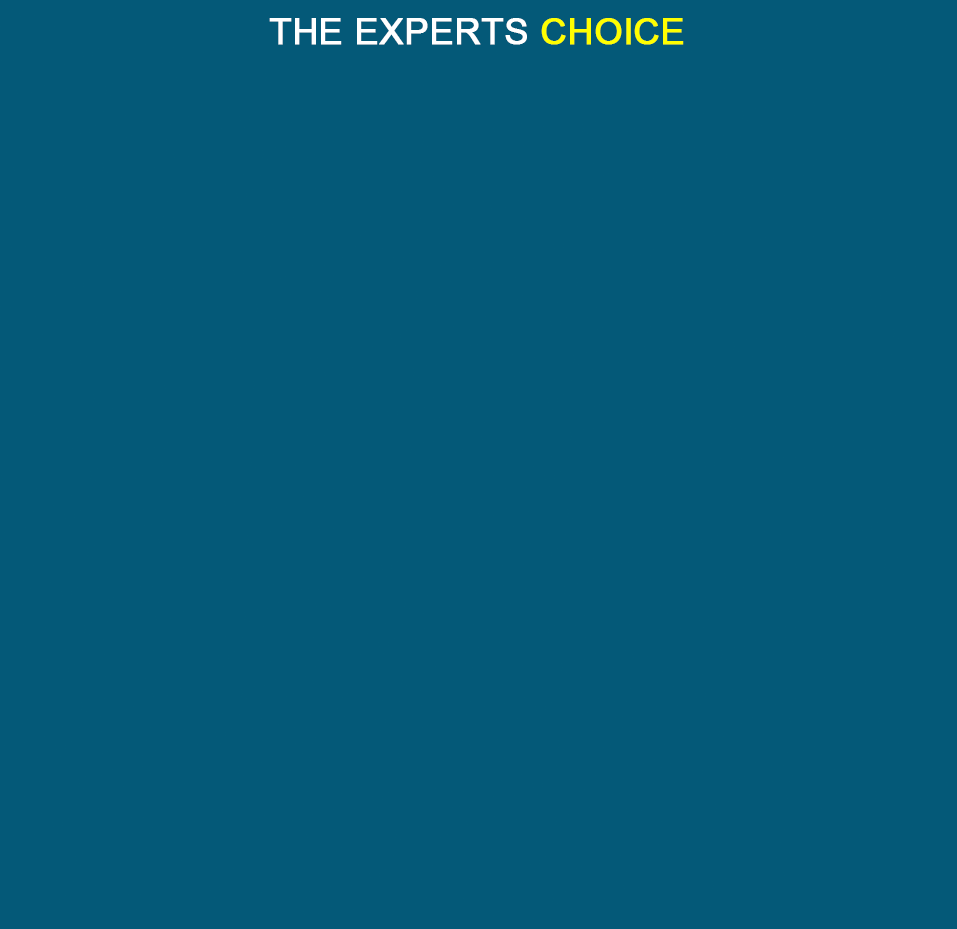
<style>
.page{position:relative;width:957px;height:929px;background:#045978}
.page>*{position:absolute;margin:0}
.t1{font:36px "ArialMT";color:#ffffff;font-weight:bold}
.t2{font:36px "ArialMT";color:#ffff00;font-weight:bold}
</style>
<div class="page">
<p class="t1" style="left:269px;top:18px;width:415px;height:27px">THE EXPERTS<span class="t2"> CHOICE</span></p>
</div>
